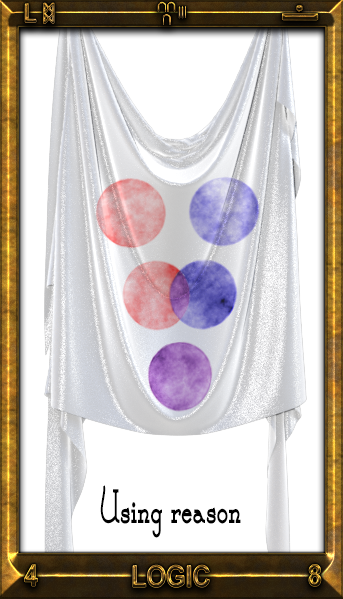
<style>
.page{position:relative;width:343px;height:599px;background:#ffffff}
.page>*{position:absolute;margin:0}
.t1{font:25.9px "Arial-BoldMT";scale:0.84 1}
.t2{font:25.9px "Geneva";scale:0.84 1}
.t3{font:53.4px "CalamityJaneNF-Bold";color:#000000;scale:0.61 1}
.t4{font:30px "Arial-BoldMT";scale:0.84 1}
</style>
<div class="page">
<p class="t1" style="left:25px;top:3px;width:11px;height:20px">L</p>
<p class="t2" style="left:43px;top:3px;width:11px;height:21px">ᛥ</p>
<p class="t3" style="left:100px;top:485px;width:141px;height:53px">Using reason</p>
<p class="t4" style="left:24px;top:564px;width:14px;height:22px">4</p>
<p class="t4" style="left:133px;top:565px;width:77px;height:23px">LOGIC</p>
<p class="t4" style="left:309px;top:564px;width:12px;height:23px">8</p>
</div>
